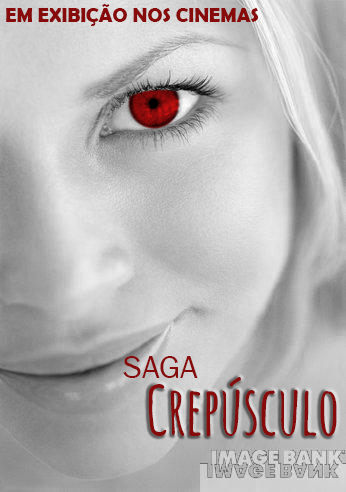
<style>
.page{position:relative;width:346px;height:492px}
.page>*{position:absolute;margin:0}
.t1{font:20px "BerlinSansFBDemi-Bold";color:#880b0b}
.t2{font:33.3px "FranklinGothic-Book";color:#880b0b}
.t3{font:66.7px "AmaticSC-Bold";color:#880b0b}
</style>
<div class="page">
<p class="t1" style="left:6px;top:4px;width:252px;height:22px">EM EXIBIÇÃO NOS CINEMAS</p>
<p class="t2" style="left:123px;top:356px;width:75px;height:22px">SAGA</p>
<p class="t3" style="left:148px;top:377px;width:189px;height:60px">Crepúsculo</p>
</div>
